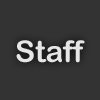
<style>
.page{position:relative;width:100px;height:100px;background:#333333}
.page>*{position:absolute;margin:0}
.t1{font:29.9px "ArialRoundedMTBold";color:#e6e6e6}
</style>
<div class="page">
<p class="t1" style="left:16px;top:40px;width:69px;height:23px">Staff</p>
</div>
